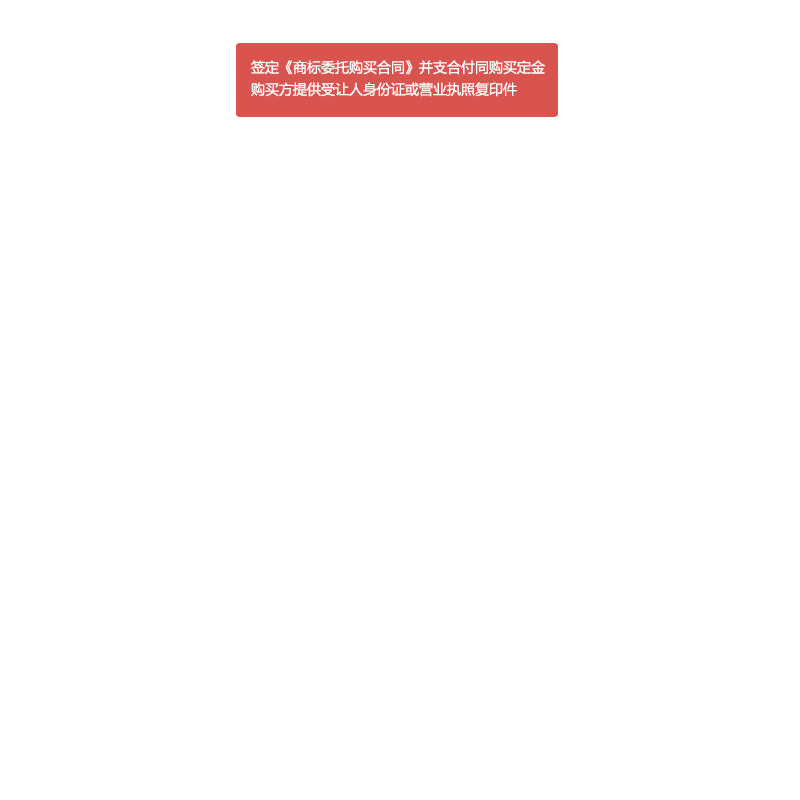
<style>
.page{position:relative;width:800px;height:800px;background:#ffffff}
.page>*{position:absolute;margin:0}
.t1{font:14px "MicrosoftYaHei";color:#ffffff}
</style>
<div class="page">
<p class="t1" style="left:251px;top:60px;width:294px;height:15px">签定《商标委托购买合同》并支合付同购买定金</p>
<p class="t1" style="left:251px;top:82px;width:266px;height:15px">购买方提供受让人身份证或营业执照复印件</p>
</div>
